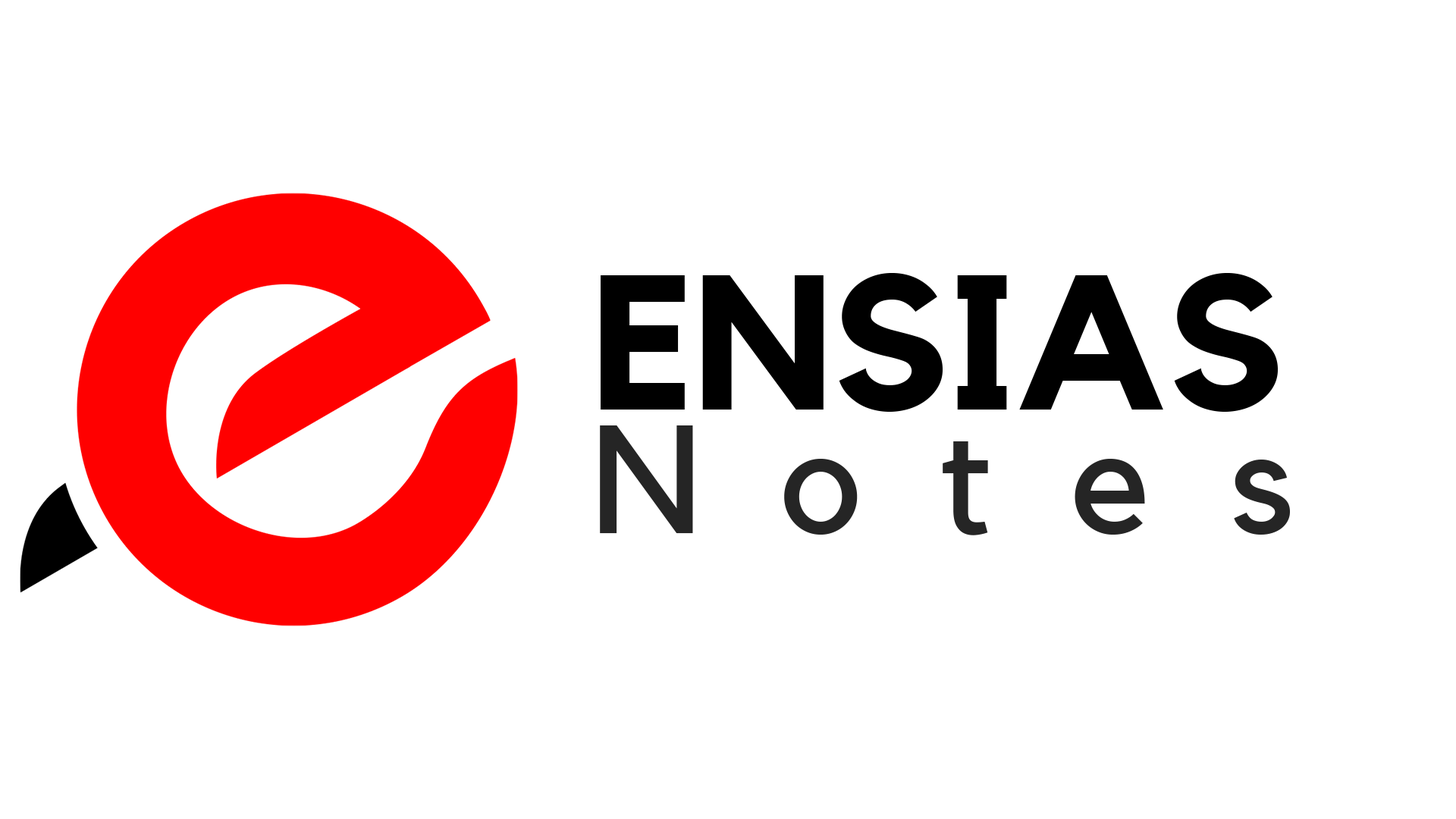
<style>
.page{position:relative;width:1456px;height:819px;background:#ffffff}
.page>*{position:absolute;margin:0}
.t1{font:189.6px/123.2px "Kollektif-Bold";color:#000000}
.t2{font:151.7px/123.2px "Kollektif";letter-spacing:0.52em;color:#252525}
</style>
<div class="page">
<p class="t1" style="left:600px;top:273px;width:690px;height:262px">ENSIAS<br><span class="t2">Notes</span></p>
</div>
